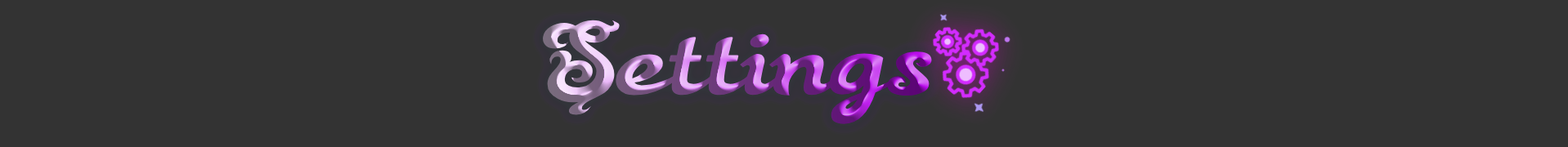
<style>
.page{position:relative;width:1568px;height:147px;background:#333333}
.page>*{position:absolute;margin:0}
.t1{font:108.8px "BlackRose";scale:1.2 1}
</style>
<div class="page">
<p class="t1" style="left:543px;top:20px;width:389px;height:104px">Settings</p>
</div>
